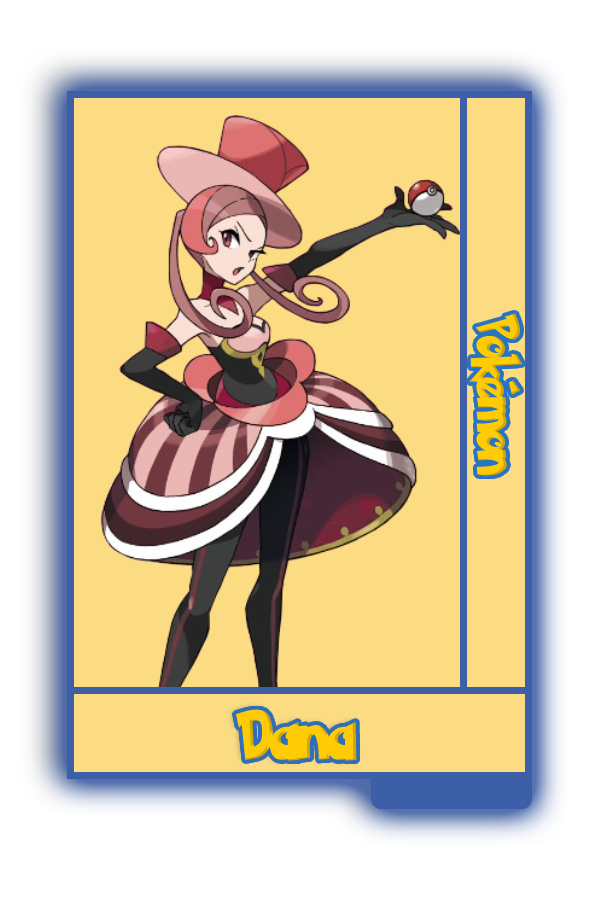
<style>
.page{position:relative;width:600px;height:900px;background:#fbdc83}
.page>*{position:absolute;margin:0}
.t1{font:48.8px "PokemonSolidNormal";color:#ffcb05;scale:0.8 1}
.t2{font:56.6px "PokemonSolidNormal";color:#ffcb05;scale:0.92 1}
</style>
<div class="page">
<p class="t1" style="left:469px;top:313px;width:54px;height:163px;rotate:90deg">Pokémon</p>
<p class="t2" style="left:235px;top:709px;width:122px;height:52px">Dana</p>
</div>
